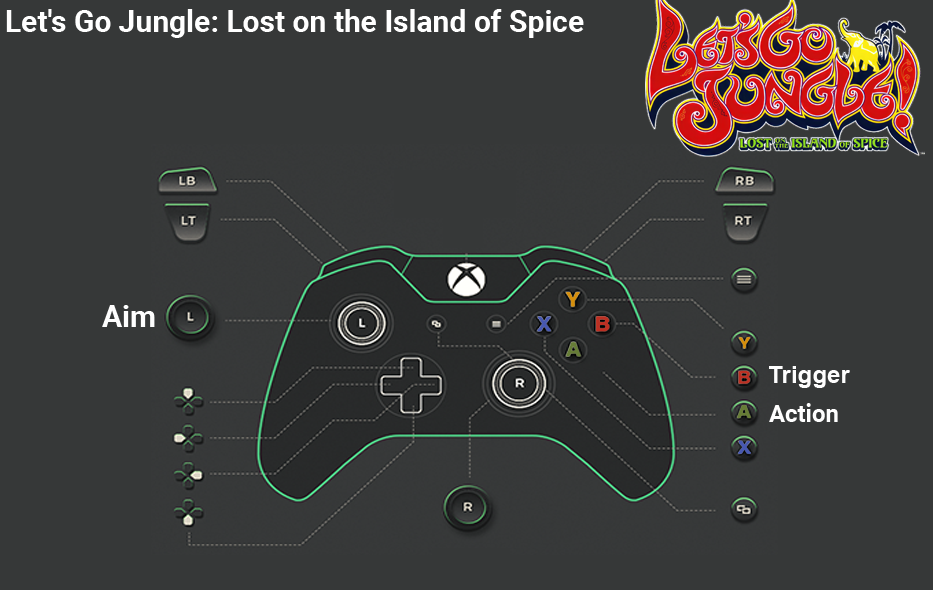
<style>
.page{position:relative;width:933px;height:590px;background:#363838}
.page>*{position:absolute;margin:0}
.t1{font:30px "Roboto-Bold";color:#ffffff}
.t2{font:30px "Roboto-Bold";color:#fefefe}
.t3{font:24px "Arial-BoldMT";color:#fefefe}
.t4{font:24px "Roboto-Bold";color:#ffffff}
</style>
<div class="page">
<p class="t1" style="left:6px;top:9px;width:578px;height:29px">Let's Go Jungle: Lost on the Island of Spice</p>
<p class="t2" style="left:102px;top:305px;width:53px;height:22px">Aim</p>
<p class="t3" style="left:769px;top:366px;width:81px;height:22px">Trigger</p>
<p class="t4" style="left:769px;top:403px;width:69px;height:19px">Action</p>
</div>
